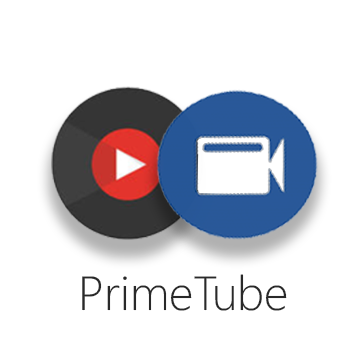
<style>
.page{position:relative;width:358px;height:358px;background:#ffffff}
.page>*{position:absolute;margin:0}
.t1{font:48px "SegoeWP-Light";color:#292929}
</style>
<div class="page">
<p class="t1" style="left:82px;top:274px;width:205px;height:37px">PrimeTube</p>
</div>
